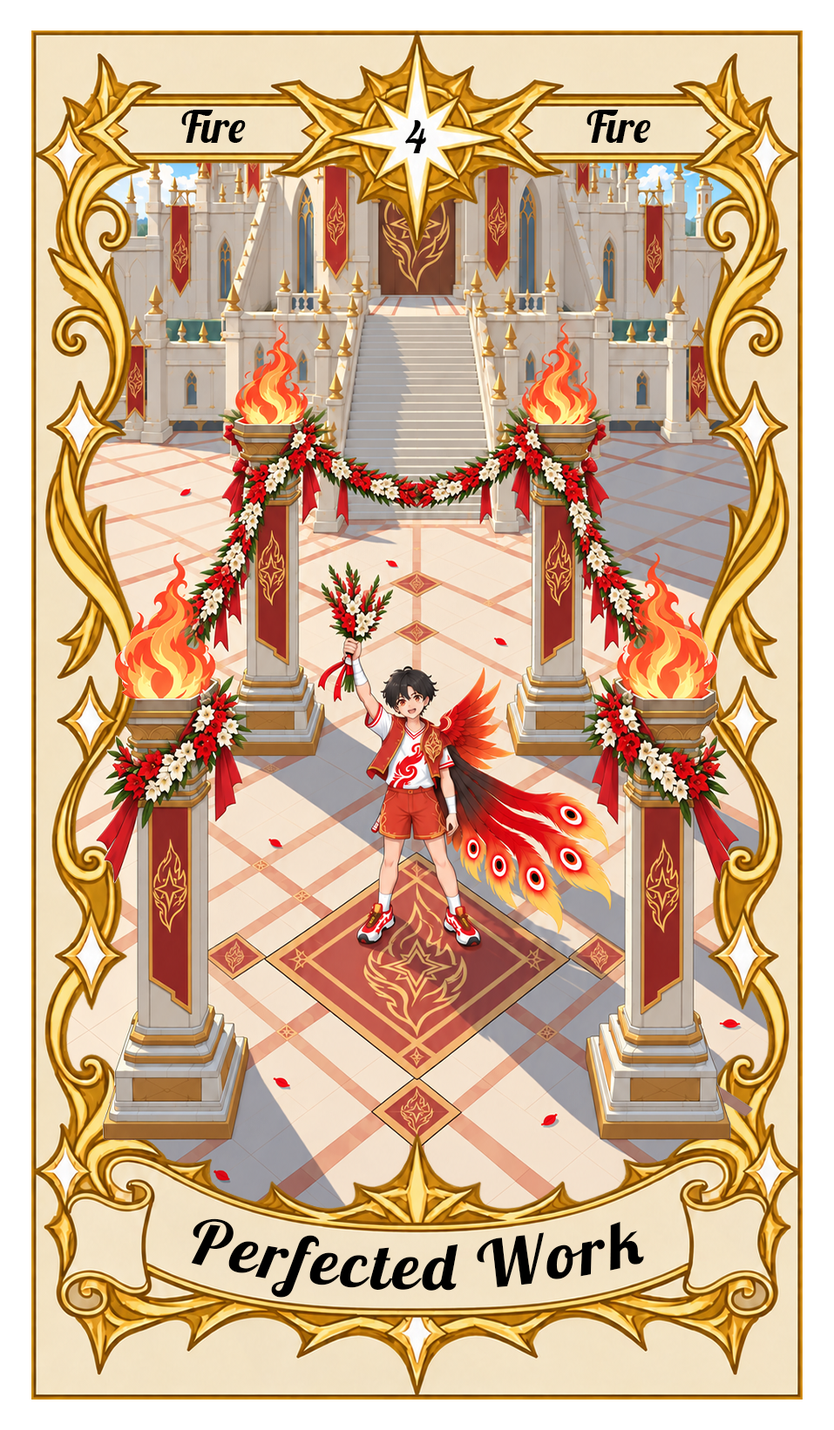
<style>
.page{position:relative;width:834px;height:1430px}
.page>*{position:absolute;margin:0}
.t1{font:43.6px "Lobster-Regular";color:#000000}
.t2{font:65.3px "Lobster-Regular";letter-spacing:0.05em;color:#000000}
</style>
<div class="page">
<p class="t1" style="left:181px;top:110px;width:65px;height:33px">Fire</p>
<p class="t1" style="left:586px;top:110px;width:65px;height:33px">Fire</p>
<p class="t1" style="left:404px;top:120px;width:22px;height:33px">4</p>
<p class="t2" style="left:191px;top:1219px;width:453px;height:79px">Perfected Work</p>
</div>
